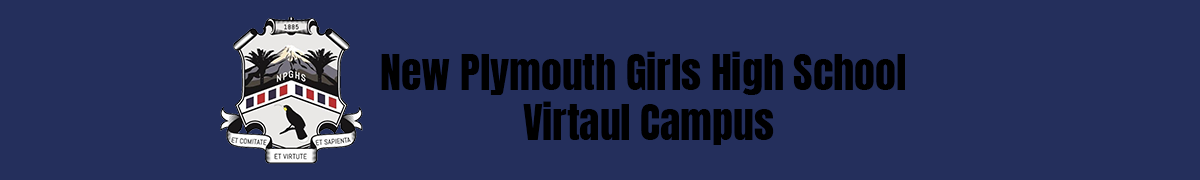
<style>
.page{position:relative;width:1200px;height:180px;background:#242f5c}
.page>*{position:absolute;margin:0}
.t1{font:41.7px "Anton-Regular";color:#000000}
</style>
<div class="page">
<p class="t1" style="left:381px;top:51px;width:524px;height:94px;text-align:center">New Plymouth Girls High School <br>Virtaul Campus</p>
</div>
